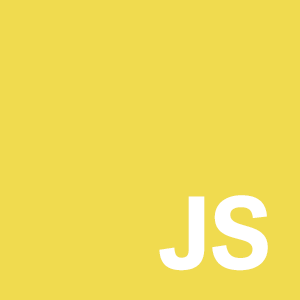
<style>
.page{position:relative;width:300px;height:300px;background:#f0db4f}
.page>*{position:absolute;margin:0}
.t1{font:100px "AdelleSans-Bold";color:#ffffff}
</style>
<div class="page">
<p class="t1" style="left:159px;top:195px;width:109px;height:76px">JS</p>
</div>
